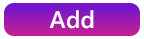
<style>
.page{position:relative;width:144px;height:39px;background:#ffffff}
.page>*{position:absolute;margin:0}
.t1{font:23.9px "YuGothicUI-Semibold";color:#ffffff}
</style>
<div class="page">
<p class="t1" style="left:49px;top:10px;width:45px;height:19px">Add</p>
</div>
